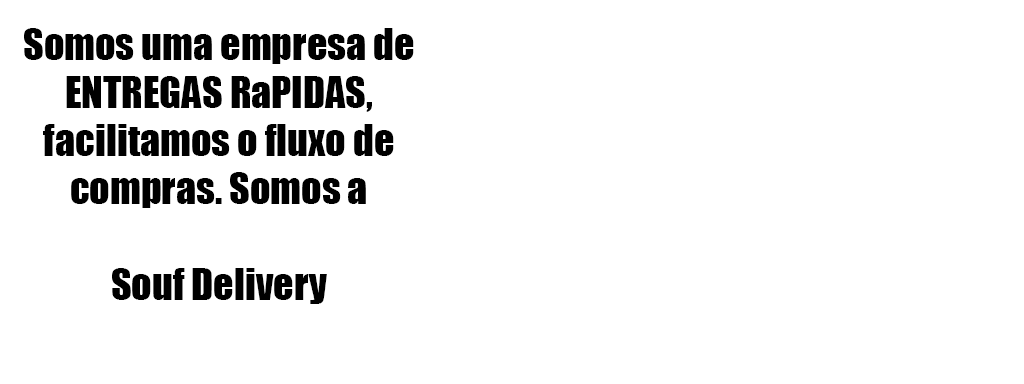
<style>
.page{position:relative;width:1024px;height:384px;background:#ffffff}
.page>*{position:absolute;margin:0}
.t1{font:40px/48px "Impact";color:#000000}
</style>
<div class="page">
<p class="t1" style="left:24px;top:28px;width:390px;height:276px;text-align:center">Somos uma empresa de <br>ENTREGAS RaPIDAS, <br>facilitamos o fluxo de <br>compras. Somos a <br><br>Souf Delivery</p>
</div>
